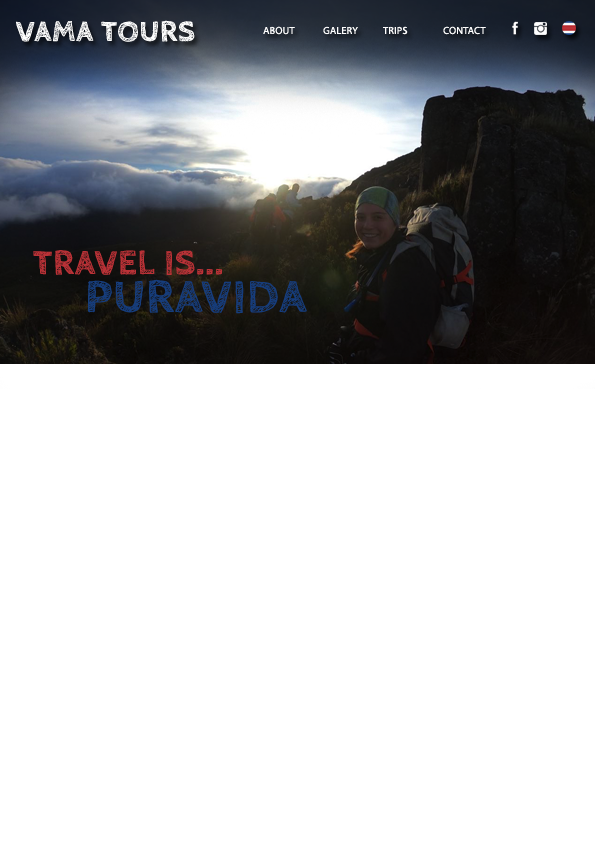
<style>
.page{position:relative;width:595px;height:842px;background:#ffffff}
.page>*{position:absolute;margin:0}
.t1{font:30px "CabinSketch-Bold";letter-spacing:0.02em;color:#ffffff}
.t2{font:10.2px "MyriadPro-Regular";letter-spacing:0.02em;color:#ffffff}
.t3{font:36px "CabinSketch-Bold";letter-spacing:0.02em;color:#bb3237}
.t4{font:48px "CabinSketch-Bold";letter-spacing:0.02em;color:#163d7c}
</style>
<div class="page">
<p class="t1" style="left:16px;top:20px;width:179px;height:22px">VAMA TOURS</p>
<p class="t2" style="left:263px;top:26px;width:32px;height:9px">ABOUT</p>
<p class="t2" style="left:323px;top:26px;width:35px;height:9px">GALERY</p>
<p class="t2" style="left:383px;top:26px;width:25px;height:9px">TRIPS</p>
<p class="t2" style="left:443px;top:26px;width:43px;height:9px">CONTACT</p>
<p class="t3" style="left:33px;top:250px;width:190px;height:25px">TRAVEL IS...</p>
<p class="t4" style="left:88px;top:279px;width:219px;height:35px">PURAVIDA</p>
</div>
